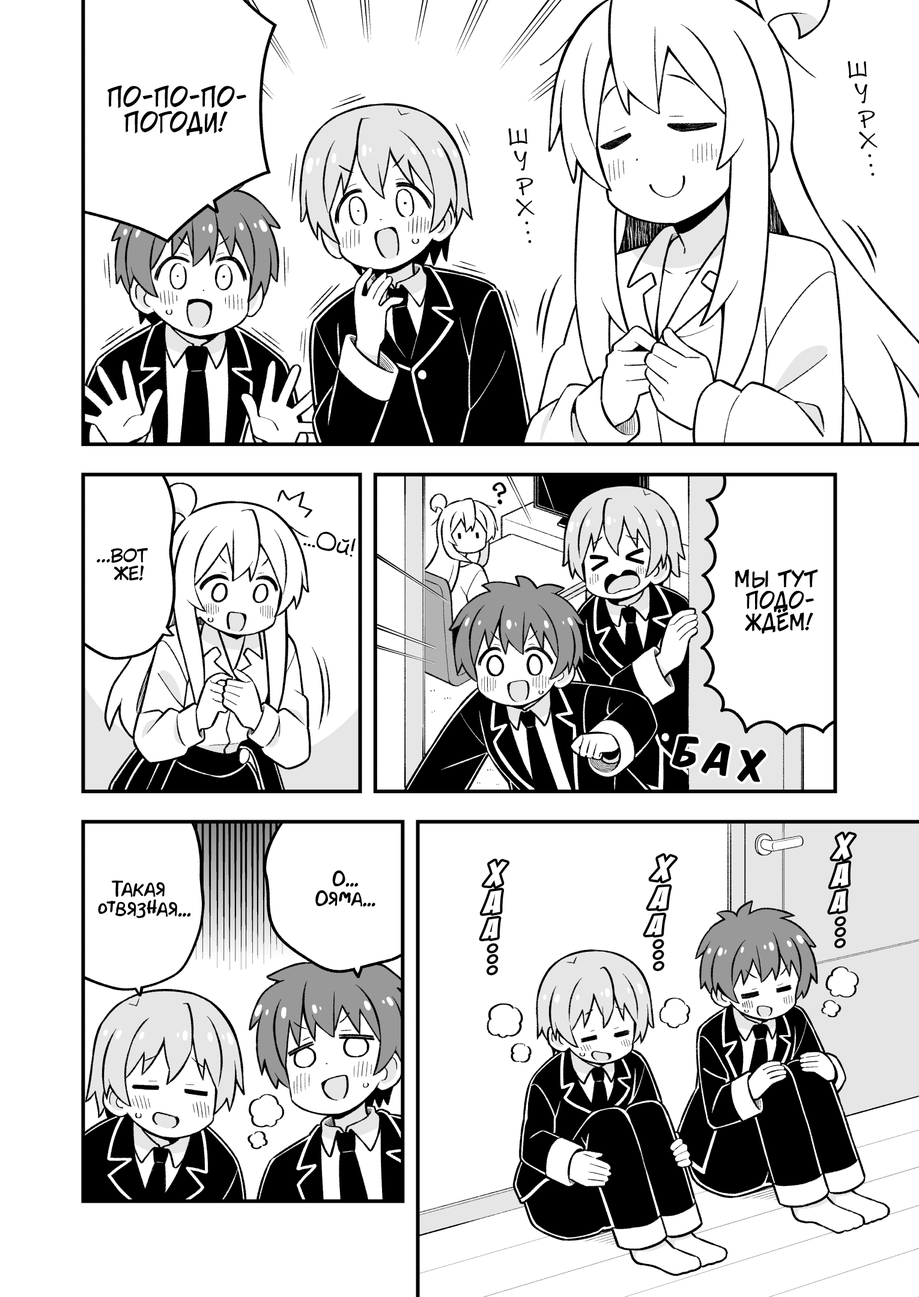
<style>
.page{position:relative;width:919px;height:1297px;background:#ffffff}
.page>*{position:absolute;margin:0}
.t1{font:25.2px "DSNote";color:#000000}
.t2{font:25.2px "v_CCJeffCampbell";color:#000000;text-transform:uppercase}
.t3{font:18px "DSNote";color:#000000}
.t4{font:24px "v_Augie";color:#000000}
.t5{font:18px "KuraiVoice2";color:#000000;text-transform:uppercase}
.t6{font:21.6px "v_CCJeffCampbell";color:#000000;text-transform:uppercase}
.t7{font:36px "KomikaTitle-AxisRUS-LAT";color:#000000}
.t8{font:36px "BadaBoom";color:#ffffff;scale:1.2 1}
.t9{font:33.6px "BadaBoom";color:#ffffff;scale:1.2 1}
.t10{font:19.8px "AkbarPlain";color:#000000}
.t11{font:30px "BadaBoom";color:#ffffff;scale:1.2 1}
.t12{font:32.4px "BadaBoom";color:#ffffff}
</style>
<div class="page">
<p class="t1" style="left:848px;top:61px;width:19px;height:18px;rotate:-4deg">ш</p>
<p class="t2" style="left:107px;top:85px;width:139px;height:51px;text-align:center">По-по-по-<br>погоди!</p>
<p class="t1" style="left:855px;top:83px;width:12px;height:20px;rotate:-6deg">у</p>
<p class="t1" style="left:858px;top:111px;width:17px;height:18px;rotate:-8deg">р</p>
<p class="t1" style="left:508px;top:128px;width:20px;height:18px;rotate:-4deg">ш</p>
<p class="t1" style="left:859px;top:132px;width:19px;height:17px;rotate:-4deg">х</p>
<p class="t1" style="left:514px;top:151px;width:13px;height:20px;rotate:-6deg">у</p>
<p class="t3" style="left:868px;top:154px;width:4px;height:3px">.</p>
<p class="t3" style="left:869px;top:164px;width:4px;height:3px">.</p>
<p class="t3" style="left:871px;top:173px;width:4px;height:3px">.</p>
<p class="t1" style="left:516px;top:178px;width:17px;height:18px;rotate:-8deg">р</p>
<p class="t1" style="left:516px;top:199px;width:19px;height:17px;rotate:-4deg">х</p>
<p class="t3" style="left:525px;top:222px;width:4px;height:3px">.</p>
<p class="t3" style="left:526px;top:231px;width:4px;height:3px">.</p>
<p class="t3" style="left:528px;top:240px;width:4px;height:3px">.</p>
<p class="t4" style="left:303px;top:532px;width:53px;height:25px;rotate:13deg">...Ой!</p>
<p class="t5" style="left:97px;top:548px;width:51px;height:33px;text-align:center">...Вот<br>же!</p>
<p class="t6" style="left:735px;top:569px;width:83px;height:65px;text-align:center">Мы тут<br>подо-<br>ждём!</p>
<p class="t7" style="left:672px;top:736px;width:27px;height:32px;rotate:9deg">б</p>
<p class="t7" style="left:701px;top:743px;width:29px;height:34px;rotate:8deg">а</p>
<p class="t7" style="left:737px;top:750px;width:29px;height:32px;rotate:2deg">х</p>
<p class="t8" style="left:832px;top:834px;width:23px;height:26px;rotate:-2deg">х</p>
<p class="t8" style="left:651px;top:855px;width:25px;height:27px;rotate:4deg">х</p>
<p class="t8" style="left:484px;top:861px;width:24px;height:26px">х</p>
<p class="t9" style="left:830px;top:863px;width:19px;height:25px;rotate:-3deg">а</p>
<p class="t10" style="left:98px;top:881px;width:93px;height:37px;text-align:center">Такая<br>отвязная...</p>
<p class="t10" style="left:315px;top:870px;width:60px;height:37px;text-align:center">О...<br>Ояма...</p>
<p class="t9" style="left:482px;top:890px;width:20px;height:24px">а</p>
<p class="t9" style="left:648px;top:887px;width:22px;height:22px;rotate:4deg">а</p>
<p class="t11" style="left:830px;top:891px;width:16px;height:22px;rotate:-2deg">а</p>
<p class="t11" style="left:645px;top:915px;width:19px;height:21px;rotate:3deg">а</p>
<p class="t11" style="left:481px;top:918px;width:18px;height:21px">а</p>
<p class="t12" style="left:837px;top:918px;width:7px;height:6px">.</p>
<p class="t12" style="left:837px;top:929px;width:7px;height:6px">.</p>
<p class="t12" style="left:655px;top:941px;width:7px;height:6px">.</p>
<p class="t12" style="left:837px;top:941px;width:6px;height:6px">.</p>
<p class="t12" style="left:489px;top:945px;width:7px;height:6px">.</p>
<p class="t12" style="left:655px;top:952px;width:7px;height:6px">.</p>
<p class="t12" style="left:489px;top:956px;width:7px;height:6px">.</p>
<p class="t12" style="left:655px;top:963px;width:7px;height:7px">.</p>
<p class="t12" style="left:489px;top:968px;width:7px;height:6px">.</p>
</div>
